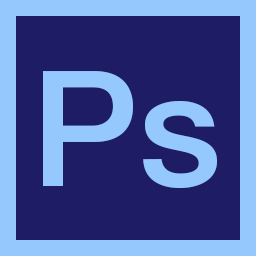
<style>
.page{position:relative;width:256px;height:256px;background:#1f1c66}
.page>*{position:absolute;margin:0}
.t1{font:160.5px "HelveticaNeueLTPro-Md";color:#95c9fe}
</style>
<div class="page">
<p class="t1" style="left:43px;top:71px;width:174px;height:117px">Ps</p>
</div>
